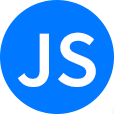
<style>
.page{position:relative;width:114px;height:114px;background:#0078ff}
.page>*{position:absolute;margin:0}
.t1{font:80px "SourceSansPro-SemiBold";color:#ffffff}
</style>
<div class="page">
<p class="t1" style="left:18px;top:32px;width:78px;height:55px">JS</p>
</div>
